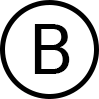
<style>
.page{position:relative;width:99px;height:99px;background:#ffffff}
.page>*{position:absolute;margin:0}
.t1{font:71px "Roboto-Regular";color:#000000}
</style>
<div class="page">
<p class="t1" style="left:34px;top:24px;width:36px;height:50px">B</p>
</div>
